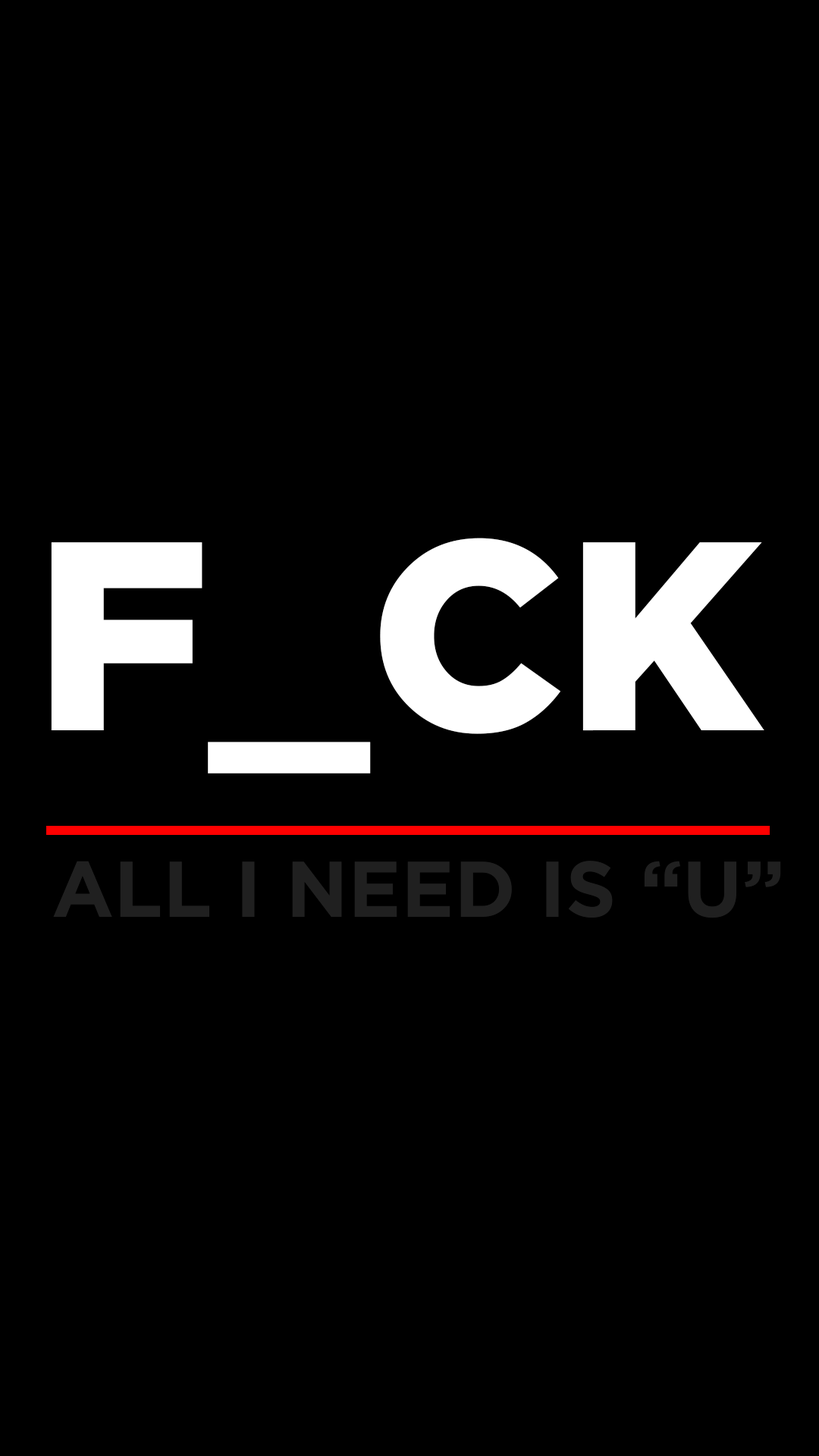
<style>
.page{position:relative;width:819px;height:1456px;background:#000000}
.page>*{position:absolute;margin:0}
.t1{font:268.6px "GothamPro-Black";color:#ffffff}
.t2{font:79px "GothamPro-Bold";color:#202020}
</style>
<div class="page">
<p class="t1" style="left:51px;top:538px;width:713px;height:235px">F_CK</p>
<p class="t2" style="left:53px;top:861px;width:728px;height:57px">ALL I NEED IS “U”</p>
</div>
